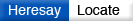
<style>
.page{position:relative;width:133px;height:21px;background:#ffffff}
.page>*{position:absolute;margin:0}
.t1{font:14px "Helvetica";letter-spacing:0.01em;color:#ffffff}
.t2{font:14px "Helvetica";letter-spacing:0.01em;color:#000000}
</style>
<div class="page">
<p class="t1" style="left:9px;top:5px;width:52px;height:13px">Heresay</p>
<p class="t2" style="left:78px;top:5px;width:42px;height:10px">Locate</p>
</div>
